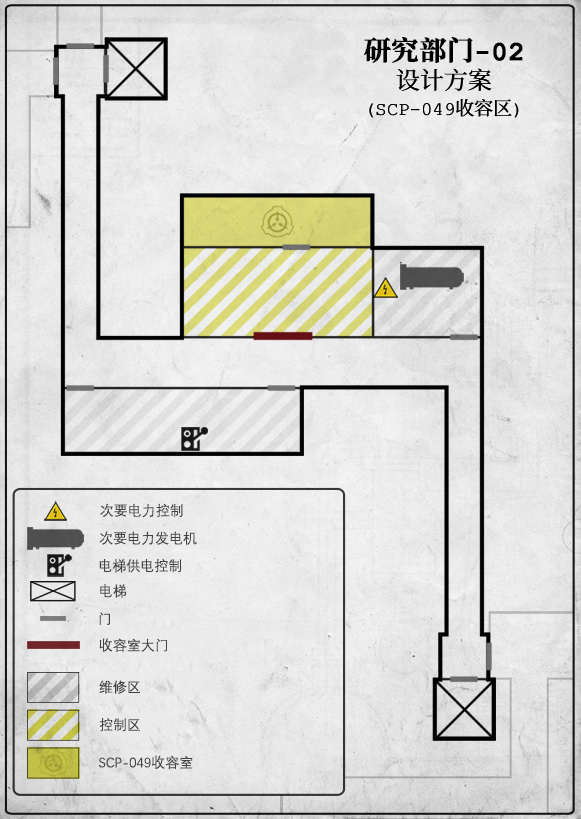
<style>
.page{position:relative;width:581px;height:819px}
.page>*{position:absolute;margin:0}
.t1{font:27px "ContainmentBreach-Bold";color:#000000;font-weight:bold}
.t2{font:24px "ContainmentBreach-Regular";color:#000000}
.t3{font:19px "ContainmentBreach-Regular";color:#000000}
.t4{font:14px "DengXian";color:#424242}
</style>
<div class="page">
<p class="t1" style="left:364px;top:37px;width:159px;height:26px">研究部门-02</p>
<p class="t2" style="left:396px;top:68px;width:96px;height:23px">设计方案</p>
<p class="t3" style="left:369px;top:99px;width:150px;height:19px">（SCP-049收容区）</p>
<p class="t4" style="left:100px;top:503px;width:83px;height:15px">次要电力控制</p>
<p class="t4" style="left:99px;top:531px;width:98px;height:14px">次要电力发电机</p>
<p class="t4" style="left:99px;top:559px;width:83px;height:14px">电梯供电控制</p>
<p class="t4" style="left:100px;top:584px;width:27px;height:14px">电梯</p>
<p class="t4" style="left:99px;top:612px;width:11px;height:13px">门</p>
<p class="t4" style="left:99px;top:638px;width:68px;height:14px">收容室大门</p>
<p class="t4" style="left:99px;top:680px;width:41px;height:14px">维修区</p>
<p class="t4" style="left:99px;top:718px;width:41px;height:14px">控制区</p>
<p class="t4" style="left:99px;top:755px;width:94px;height:15px">SCP-049收容室</p>
</div>
